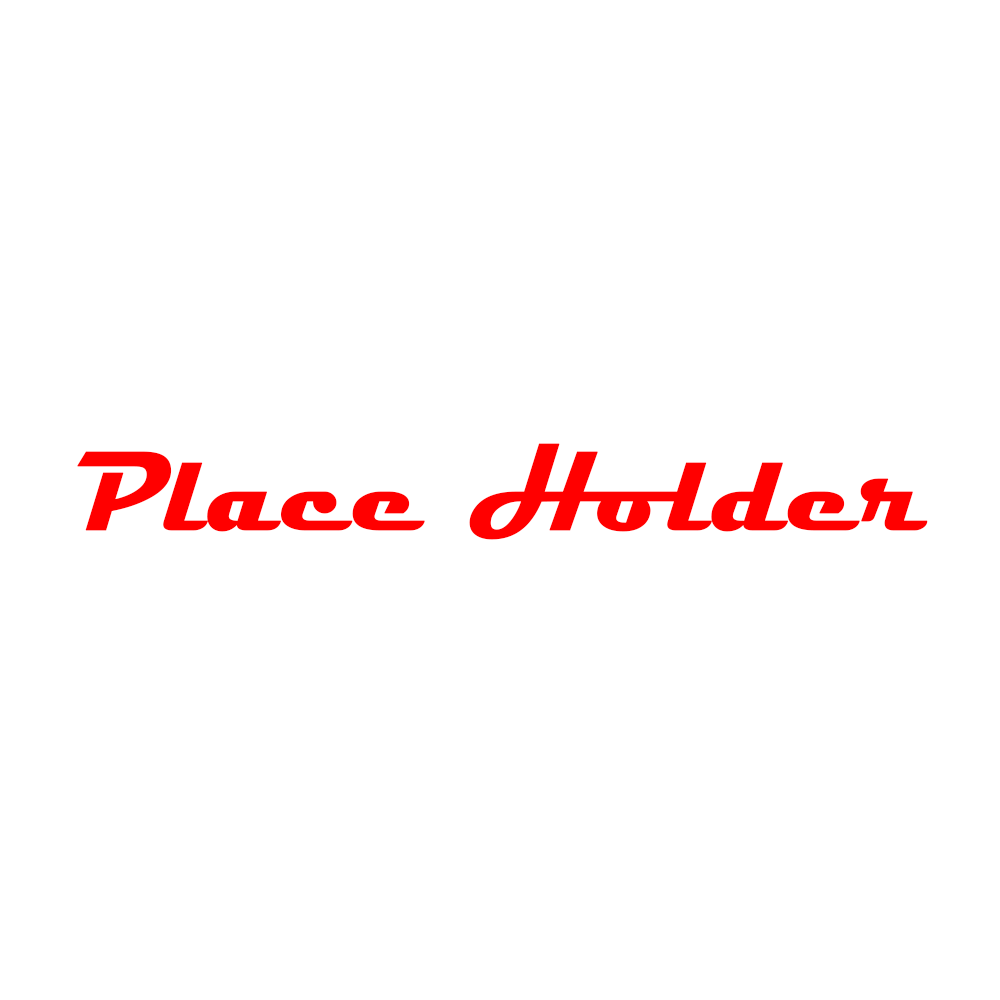
<style>
.page{position:relative;width:1000px;height:1000px;background:#ffffff}
.page>*{position:absolute;margin:0}
.t1{font:112.8px "Magneto-Bold";color:#ff0000;font-weight:bold}
</style>
<div class="page">
<p class="t1" style="left:77px;top:443px;width:851px;height:97px">Place Holder</p>
</div>
